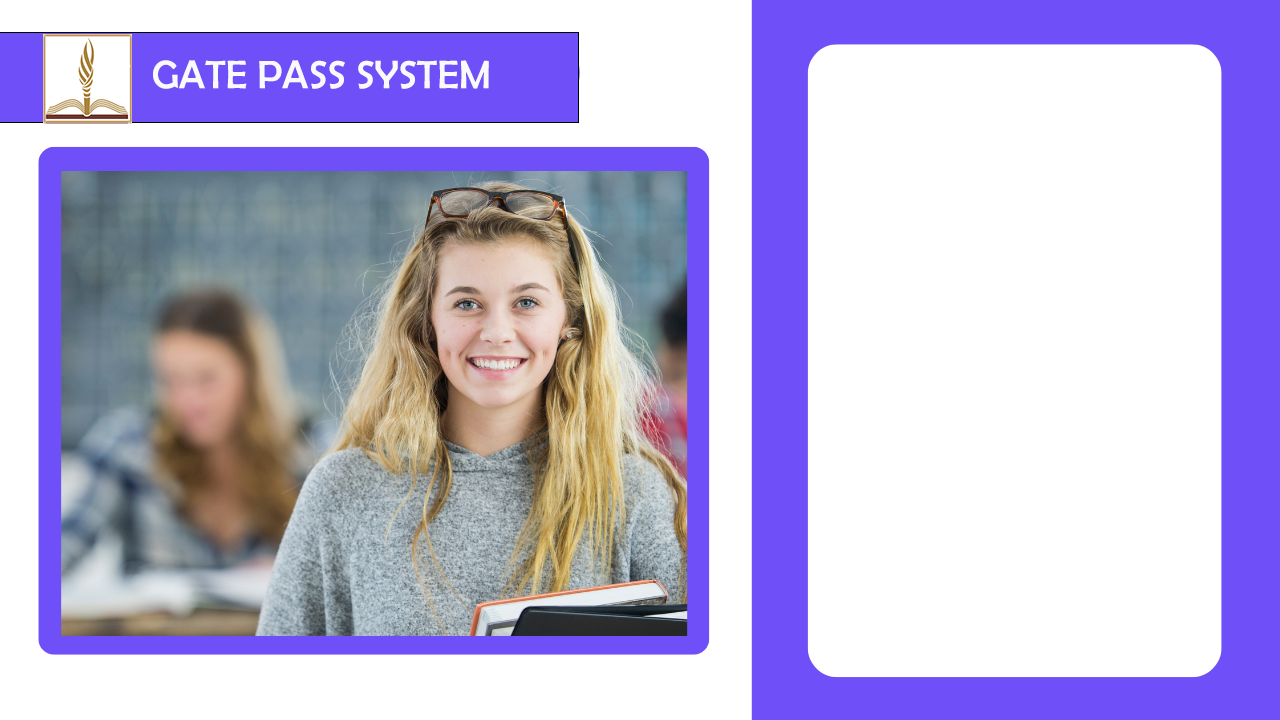
<style>
.page{position:relative;width:1280px;height:720px;background:#ffffff}
.page>*{position:absolute;margin:0}
.t1{font:40px "BerlinSansFB-Reg";color:#f9f9f9}
</style>
<div class="page">
<p class="t1" style="left:153px;top:60px;width:336px;height:29px">GATE PASS SYSTEM</p>
</div>
